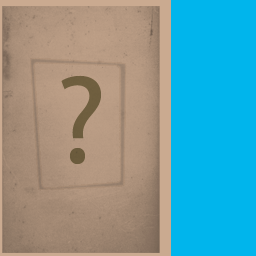
<style>
.page{position:relative;width:256px;height:256px;background:#00b5ec}
.page>*{position:absolute;margin:0}
.t1{font:128px "MyriadPro-Regular";color:#786644}
</style>
<div class="page">
<p class="t1" style="left:61px;top:75px;width:40px;height:89px">?</p>
</div>
